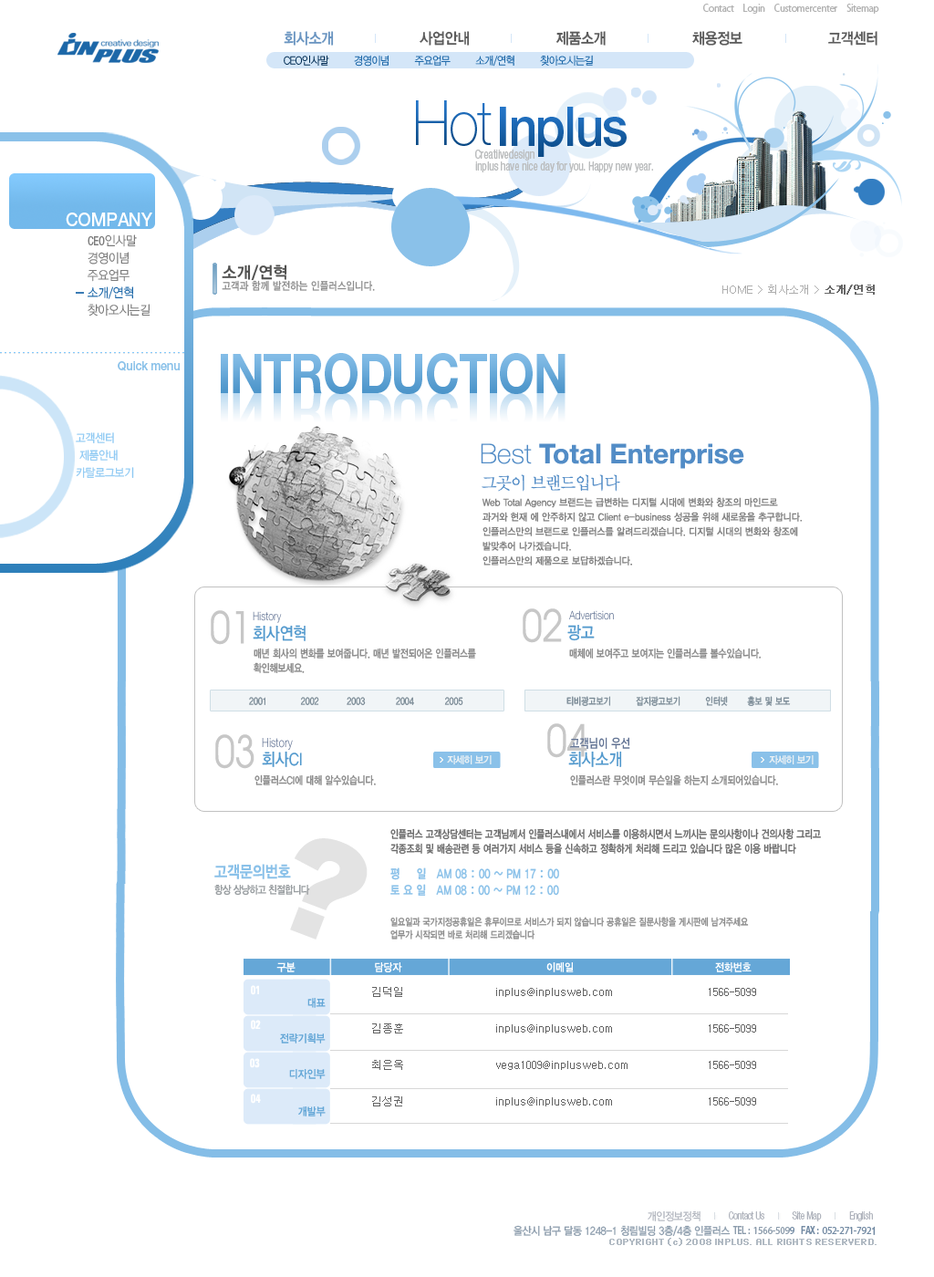
<style>
.page{position:relative;width:934px;height:1277px;background:#ffffff}
.page>*{position:absolute;margin:0}
.t1{font:10.9px "MyriadPro-Regular";letter-spacing:-0.025em;color:#b2b2b2;scale:0.9 1}
.t2{font:15.5px "YDIYGO340";letter-spacing:-0.025em;color:#5c5c5c;scale:0.9 1}
.t3{font:15.5px "YDIYGO340";letter-spacing:-0.025em;color:#6a95c1;scale:0.9 1}
.t4{font:10.9px "YDIYGO310";letter-spacing:-0.025em;color:#1c67a8;scale:0.9 1}
.t5{font:10.9px "YDIYGO310";letter-spacing:-0.025em;color:#042f55;scale:0.9 1}
.t6{font:62.6px "HelveticaNeue-Thin";letter-spacing:-0.025em;color:#1c67a8;scale:0.9 1}
.t7{font:62.6px "HelveticaNeue-Thin";letter-spacing:-0.025em;color:#1c67a8;text-transform:uppercase;scale:0.9 1}
.t8{font:54.7px "HelveticaNeue-Medium";letter-spacing:-0.025em;color:#1c67a8;scale:0.9 1}
.t9{font:12.5px/11.8px "HelveticaNeue-Condensed";letter-spacing:-0.025em;color:#bbbdbe;scale:0.9 1}
.t10{font:19.2px "HelveticaNeue-Medium";letter-spacing:-0.01em;color:#ffffff;text-transform:uppercase;scale:0.9 1}
.t11{font:12.8px/17.3px "YDIYGO310";letter-spacing:-0.01em;color:#7b7b7b;text-transform:uppercase;scale:0.9 1}
.t12{font:12.8px/17.3px "HelveticaNeue-Condensed";letter-spacing:-0.01em;color:#7b7b7b;text-transform:uppercase;scale:0.9 1}
.t13{font:12.8px/17.3px "YDIYGO310";letter-spacing:-0.01em;color:#1c67a8;text-transform:uppercase;scale:0.9 1}
.t14{font:10.9px/12.8px "YDIYGO330";letter-spacing:0.02em;color:#8d8d8d;scale:0.85 1}
.t15{font:16.4px/16.4px "YDIYGO340";letter-spacing:0.02em;color:#50504f;scale:0.95 1}
.t16{font:10.9px "Dotum";letter-spacing:-0.025em;color:#adadad}
.t17{font:10.9px "Dotum";letter-spacing:-0.025em;color:#676767;font-weight:bold}
.t18{font:54.7px "HelveticaNeue-Bold";letter-spacing:-0.025em;text-transform:uppercase;scale:0.85 1}
.t19{font:12.8px "HelveticaNeue-Medium";letter-spacing:-0.01em;color:#8ac1e9;scale:0.9 1}
.t20{font:12.8px "HelveticaNeue-Medium";letter-spacing:-0.01em;color:#8ac1e9;text-transform:uppercase;scale:0.9 1}
.t21{font:11.9px/17.3px "YDIYGO320";letter-spacing:-0.01em;color:#8ec9f3;text-transform:uppercase;scale:0.9 1}
.t22{font:27.4px "HelveticaNeue-Bold";color:#528cc6}
.t23{font:27.4px "HelveticaNeue-Thin";color:#528cc6}
.t24{font:17.2px "YDIYMjO320";letter-spacing:-0.04em;color:#528cc6;scale:0.95 1}
.t25{font:10px/14.6px "YDIYGO330";color:#808080;scale:0.9 1}
.t26{font:43.8px "Love";color:#c7c7c7;scale:0.85 1}
.t27{font:11.9px "HelveticaNeue-Light";color:#647595;scale:0.8 1}
.t28{font:17.3px "YDIYGO330";color:#5299cd;scale:0.85 1}
.t29{font:10.9px/14.6px "YDIYGO330";color:#898989;scale:0.8 1}
.t30{font:10.9px "YDIYGO330";color:#898989;scale:0.8 1}
.t31{font:10px "YDIYGO330";color:#7a8a95;scale:0.8 1}
.t32{font:12.8px "HelveticaNeue-Light";scale:0.8 1}
.t33{font:12.8px "YDIYGO340";color:#647595;scale:0.8 1}
.t34{font:10px "YDIYGO330";letter-spacing:-0.05em;color:#ebf1f4;scale:0.95 1}
.t35{font:10.9px/14.6px "YDIYGO330";color:#686868;scale:0.8 1}
.t36{font:137.1px "Arial-Black";letter-spacing:-0.05em;color:#e3e3e3}
.t37{font:16.4px "YDIYGO340";letter-spacing:-0.01em;color:#8ac1e9;scale:0.85 1}
.t38{font:12.8px/16.4px "YDIYGO340";color:#8ac1e9;scale:0.8 1}
.t39{font:10.9px "YDIYGO330";letter-spacing:-0.05em;color:#999ea1;scale:0.85 1}
.t40{font:10px/12.8px "YDIYGO340";color:#8e8e8e;scale:0.8 1}
.t41{font:10.9px "YDIYGO330";color:#ffffff;scale:0.9 1}
.t42{font:12px "Univers-CondensedBold";letter-spacing:0.025em;color:#ffffff;scale:0.86 1}
.t43{font:10.9px/36.5px "Dotum";color:#626262}
.t44{font:10.9px "YDIYGO330";color:#65a7d7;scale:0.9 1}
.t45{font:10.9px "HelveticaNeue-LightCond";letter-spacing:-0.025em;color:#b0b4bd;scale:0.9 1}
.t46{font:10.9px "YDIYGO320";letter-spacing:-0.025em;color:#b0b4bd;scale:0.9 1}
.t47{font:10.9px "YDIYGO330";letter-spacing:-0.025em;color:#8c9cac;scale:0.9 1}
.t48{font:10.9px "HelveticaNeue-MediumCond";letter-spacing:-0.025em;color:#8c9cac;scale:0.9 1}
.t49{font:10.9px "MyriadPro-Regular";letter-spacing:-0.025em;color:#8c9cac;scale:0.9 1}
.t50{font:10.9px "MyriadPro-Regular";letter-spacing:-0.025em;color:#728aa3;scale:0.9 1}
.t51{font:10.9px "HelveticaNeue-MediumCond";letter-spacing:-0.025em;color:#728aa3;scale:0.9 1}
.t52{font:10.9px "YDIYGO340";letter-spacing:-0.025em;color:#728aa3;scale:0.9 1}
.t53{font:7.3px "Standard0754";letter-spacing:-0.1em;color:#b1bac3;font-weight:bold}
</style>
<div class="page">
<p class="t1" style="left:703px;top:4px;width:176px;height:10px">Contact     Login     Customercenter     Sitemap</p>
<p class="t2" style="left:284px;top:31px;width:593px;height:15px"><span class="t3">회사소개</span>                   사업안내                   제품소개                   채용정보                   고객센터</p>
<p class="t4" style="left:284px;top:55px;width:309px;height:12px"><span class="t5">CEO인사말        </span>경영이념        주요업무        소개/연혁        찾아오시는길</p>
<p class="t6" style="left:416px;top:100px;width:76px;height:46px"><span class="t7">h</span>ot</p>
<p class="t8" style="left:500px;top:107px;width:127px;height:50px">Inplus</p>
<p class="t9" style="left:475px;top:149px;width:178px;height:23px">Creatiivedesign <br>inplus have nice day for you. Happy new year.</p>
<p class="t10" style="left:66px;top:212px;width:86px;height:14px">company</p>
<p class="t11" style="left:88px;top:234px;width:62px;height:82px"><span class="t12">CeO</span>인사말<br>경영이념<br>주요업무<br><span class="t13">소개/연혁<br></span>찾아오시는길</p>
<p class="t14" style="left:222px;top:264px;width:153px;height:27px"><span class="t15">소개/연혁 <br></span>고객과 함께 발전하는 인플러스입니다.</p>
<p class="t16" style="left:722px;top:285px;width:153px;height:10px">HOME &gt; 회사소개 &gt; <span class="t17">소개/연혁</span></p>
<p class="t18" style="left:221px;top:353px;width:344px;height:41px">introduction</p>
<p class="t19" style="left:118px;top:361px;width:62px;height:10px"><span class="t20">q</span>uick menu</p>
<p class="t18" style="left:221px;top:392px;width:344px;height:41px">introduction</p>
<p class="t21" style="left:76px;top:432px;width:58px;height:46px">고객센터<br>   제품안내<br>  카탈로그보기</p>
<p class="t22" style="left:481px;top:443px;width:263px;height:26px"><span class="t23">Best </span>Total Enterprise</p>
<p class="t24" style="left:482px;top:474px;width:138px;height:18px">그곳이 브랜드입니다</p>
<p class="t25" style="left:482px;top:497px;width:320px;height:68px">Web Total Agency 브랜드는 급변하는 디지털 시대에 변화와 창조의 마인드로 <br>과거와 현재 에 안주하지 않고 Client e-business 성공을 위해 새로움을 추구합니다.<br>인플러스만의 브랜드로 인플러스를 알려드리겠습니다. 디지털 시대의 변화와 창조에<br>발맞추어 나가겠습니다.<br>인플러스만의 제품으로 보답하겠습니다.</p>
<p class="t26" style="left:211px;top:610px;width:33px;height:35px">01</p>
<p class="t27" style="left:253px;top:611px;width:29px;height:12px">History</p>
<p class="t26" style="left:523px;top:608px;width:39px;height:35px">02</p>
<p class="t27" style="left:569px;top:610px;width:45px;height:10px">Advertision</p>
<p class="t28" style="left:253px;top:625px;width:53px;height:16px">회사연혁</p>
<p class="t28" style="left:567px;top:625px;width:28px;height:16px">광고</p>
<p class="t29" style="left:254px;top:648px;width:222px;height:25px">매년 회사의 변화를 보여줍니다. 매년 발전되어온 인플러스를 확인해보세요.</p>
<p class="t30" style="left:569px;top:648px;width:192px;height:10px">매체에 보여주고 보여지는 인플러스를 볼수있습니다.</p>
<p class="t31" style="left:249px;top:697px;width:214px;height:8px">2001            2002          2003           2004           2005</p>
<p class="t31" style="left:566px;top:696px;width:225px;height:10px">티비광고보기         잡지광고보기         인터넷       홍보 및 보도</p>
<p class="t26" style="left:547px;top:723px;width:40px;height:35px">04</p>
<p class="t26" style="left:215px;top:734px;width:39px;height:35px">03</p>
<p class="t32" style="left:262px;top:738px;width:31px;height:12px">History</p>
<p class="t33" style="left:570px;top:737px;width:60px;height:12px">고객님이 우선</p>
<p class="t28" style="left:262px;top:751px;width:40px;height:16px">회사CI</p>
<p class="t34" style="left:447px;top:755px;width:45px;height:9px">자세히 보기</p>
<p class="t28" style="left:568px;top:751px;width:54px;height:16px">회사소개</p>
<p class="t34" style="left:769px;top:755px;width:45px;height:9px">자세히 보기</p>
<p class="t30" style="left:254px;top:774px;width:122px;height:11px">인플러스CI에 대해 알수있습니다.</p>
<p class="t30" style="left:570px;top:774px;width:208px;height:11px">인플러스란 무엇이며 무슨일을 하는지 소개되어있습니다.</p>
<p class="t35" style="left:390px;top:828px;width:431px;height:26px">인플러스 고객상담센터는 고객님께서 인플러스내에서 서비스를 이용하시면서 느끼시는 문의사항이나 건의사항 그리고 <br>각종조회 및 배송관련 등 여러가지 서비스 등을 신속하고 정확하게 처리해 드리고 있습니다 많은 이용 바랍니다</p>
<p class="t36" style="left:290px;top:838px;width:78px;height:101px;rotate:21deg">?</p>
<p class="t37" style="left:214px;top:864px;width:77px;height:15px">고객문의번호</p>
<p class="t38" style="left:390px;top:867px;width:169px;height:29px">평     일   AM 08 : 00 ~ PM 17 : 00 <br>토 요 일   AM 08 : 00 ~ PM 12 : 00</p>
<p class="t39" style="left:214px;top:885px;width:96px;height:10px">항상 상냥하고 친절합니다</p>
<p class="t40" style="left:390px;top:917px;width:359px;height:22px">일요일과 국가지정공휴일은 휴무이므로 서비스가 되지 않습니다 공휴일은 질문사항을 게시판에 남겨주세요 <br>업무가 시작되면 바로 처리해 드리겠습니다</p>
<p class="t41" style="left:276px;top:962px;width:476px;height:10px">구분                       담당자                                          이메일                                         전화번호</p>
<p class="t42" style="left:251px;top:985px;width:8px;height:10px">01</p>
<p class="t43" style="left:372px;top:987px;width:31px;height:119px">김덕일<br>김종훈<br>최은옥<br>김성권</p>
<p class="t43" style="left:496px;top:988px;width:131px;height:118px">inplus@inplusweb.com<br>inplus@inplusweb.com<br>vega1009@inplusweb.com<br>inplus@inplusweb.com</p>
<p class="t43" style="left:709px;top:988px;width:47px;height:117px">1566-5099<br>1566-5099<br>1566-5099<br>1566-5099</p>
<p class="t44" style="left:307px;top:998px;width:19px;height:10px">대표</p>
<p class="t42" style="left:251px;top:1020px;width:10px;height:10px">02</p>
<p class="t44" style="left:280px;top:1033px;width:46px;height:10px">전략기획부</p>
<p class="t42" style="left:250px;top:1058px;width:10px;height:10px">03</p>
<p class="t44" style="left:289px;top:1069px;width:37px;height:10px">디자인부</p>
<p class="t42" style="left:251px;top:1094px;width:10px;height:10px">04</p>
<p class="t44" style="left:298px;top:1106px;width:28px;height:10px">개발부</p>
<p class="t45" style="left:648px;top:1210px;width:225px;height:12px"><span class="t46">개인정보정책         </span>Contact Us         Site Map         English</p>
<p class="t47" style="left:513px;top:1225px;width:363px;height:12px">울산시 남구 달동 1248-1 청림빌딩 3층/4층 인플러스 <span class="t48">TEL : </span><span class="t49">1566-509</span><span class="t50">9  </span><span class="t51">FAX : </span><span class="t50">052-271-792</span><span class="t52">1</span></p>
<p class="t53" style="left:609px;top:1238px;width:267px;height:8px">COPYRIGHT (c) 2008 INPLUS. ALL RIGHTS RESERVERD.</p>
</div>
